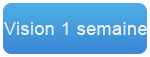
<style>
.page{position:relative;width:150px;height:57px}
.page>*{position:absolute;margin:0}
.t1{font:18px "ArialMT";letter-spacing:0.025em;color:#eceef7}
</style>
<div class="page">
<p class="t1" style="left:4px;top:22px;width:143px;height:13px">Vision 1 semaine</p>
</div>
